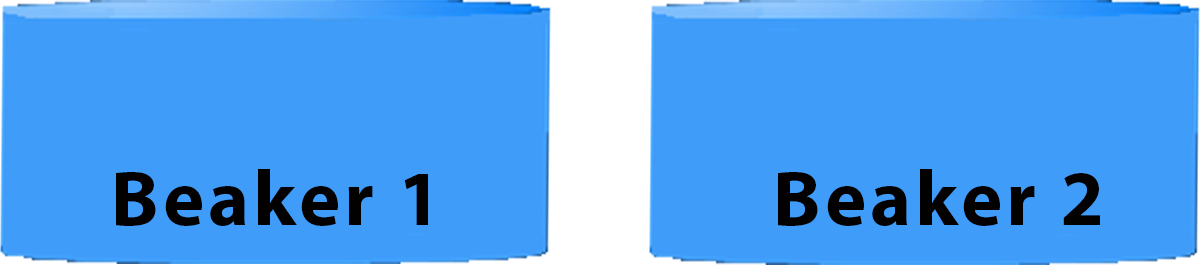
<style>
.page{position:relative;width:1200px;height:265px;background:#3f9cf9}
.page>*{position:absolute;margin:0}
.t1{font:78.4px "MyriadPro-Bold";letter-spacing:0.05em;color:#030000}
</style>
<div class="page">
<p class="t1" style="left:116px;top:169px;width:312px;height:57px">Beaker 1</p>
<p class="t1" style="left:778px;top:169px;width:322px;height:57px">Beaker 2</p>
</div>
